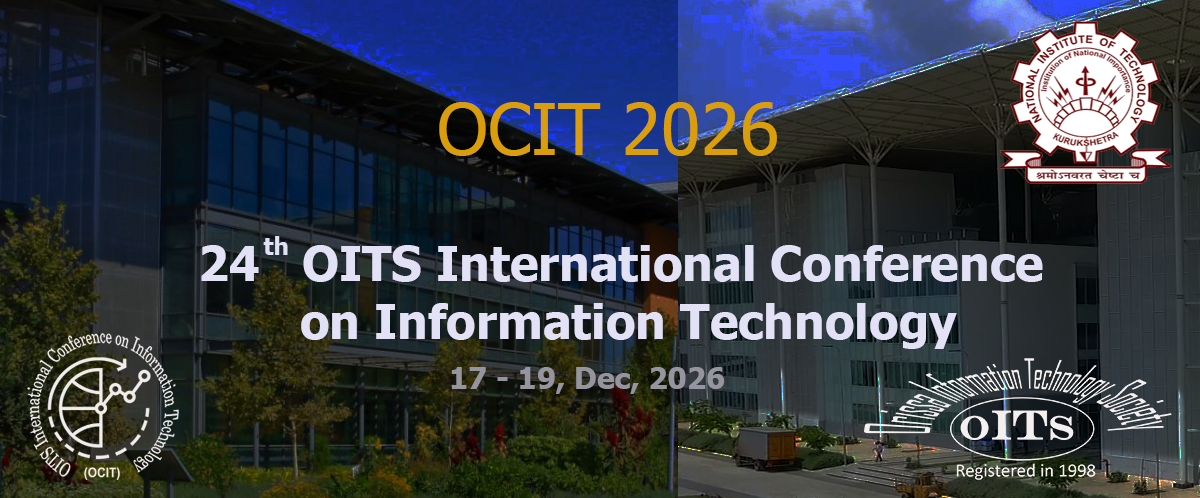
<style>
.page{position:relative;width:1200px;height:498px}
.page>*{position:absolute;margin:0}
.t1{font:72px "Tahoma";color:#da9d0b}
.t2{font:48px "Tahoma-Bold";color:#e3e1f5}
.t3{font:24px "Tahoma-Bold";color:#e3e1f5}
.t4{font:30px "Tahoma-Bold";color:#96959f}
</style>
<div class="page">
<p class="t1" style="left:439px;top:102px;width:338px;height:54px">OCIT 2026</p>
<p class="t2" style="left:201px;top:245px;width:842px;height:104px;text-align:center">24   OITS International Conference <br>on Information Technology</p>
<p class="t3" style="left:263px;top:236px;width:25px;height:19px">th</p>
<p class="t4" style="left:451px;top:367px;width:274px;height:27px">17 - 19, Dec, 2026</p>
</div>
